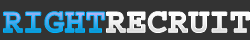
<style>
.page{position:relative;width:250px;height:40px;background:#333333}
.page>*{position:absolute;margin:0}
.t1{font:34.7px "Courier-Bold"}
.t2{font:34.7px "Courier-Bold";color:#ffffff}
</style>
<div class="page">
<p class="t1" style="left:3px;top:11px;width:102px;height:22px">RIGHT</p>
<p class="t2" style="left:106px;top:11px;width:144px;height:22px">RECRUIT</p>
</div>
